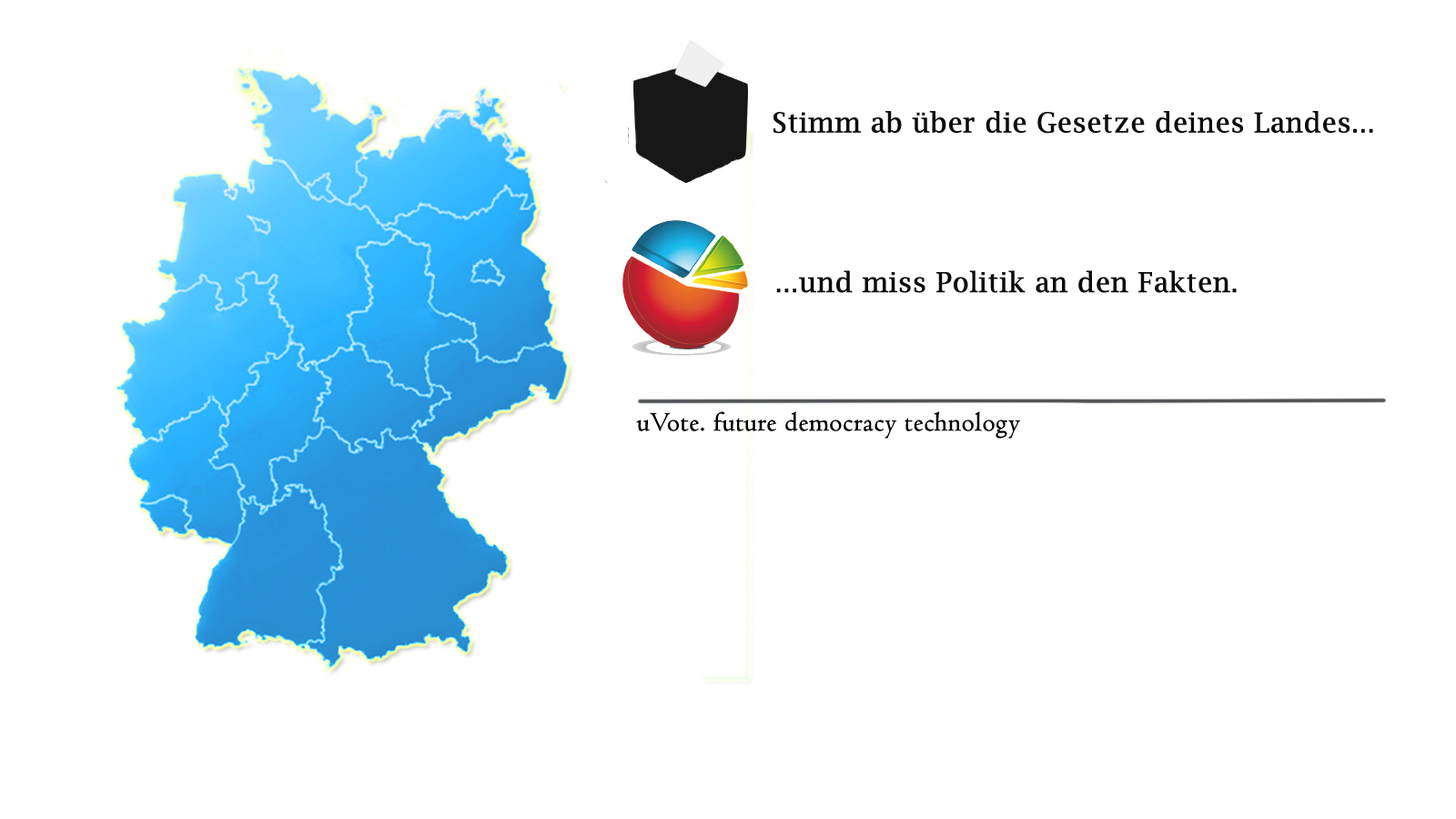
<style>
.page{position:relative;width:1456px;height:819px;background:#ffffff}
.page>*{position:absolute;margin:0}
.t1{font:27.3px "LucidaBright";color:#000000;font-weight:bold}
.t2{font:27.3px "Centaur";color:#000000;font-weight:bold}
</style>
<div class="page">
<p class="t1" style="left:773px;top:111px;width:600px;height:23px;opacity:0.95">Stimm ab über die Gesetze deines Landes...</p>
<p class="t1" style="left:776px;top:270px;width:461px;height:23px;opacity:0.95">...und miss Politik an den Fakten.</p>
<p class="t2" style="left:636px;top:411px;width:384px;height:28px">uVote. future democracy technology</p>
</div>
